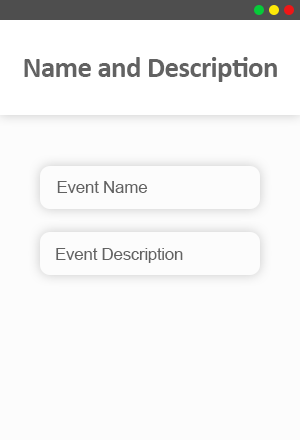
<style>
.page{position:relative;width:300px;height:440px;background:#fcfcfc}
.page>*{position:absolute;margin:0}
.t1{font:29.2px "Calibri-Bold";letter-spacing:-0.025em;color:#626262}
.t2{font:17.3px "ArialMT";letter-spacing:-0.025em;color:#626262}
</style>
<div class="page">
<p class="t1" style="left:24px;top:57px;width:253px;height:25px">Name and Description</p>
<p class="t2" style="left:57px;top:181px;width:91px;height:12px">Event Name</p>
<p class="t2" style="left:56px;top:248px;width:127px;height:15px">Event Description</p>
</div>
